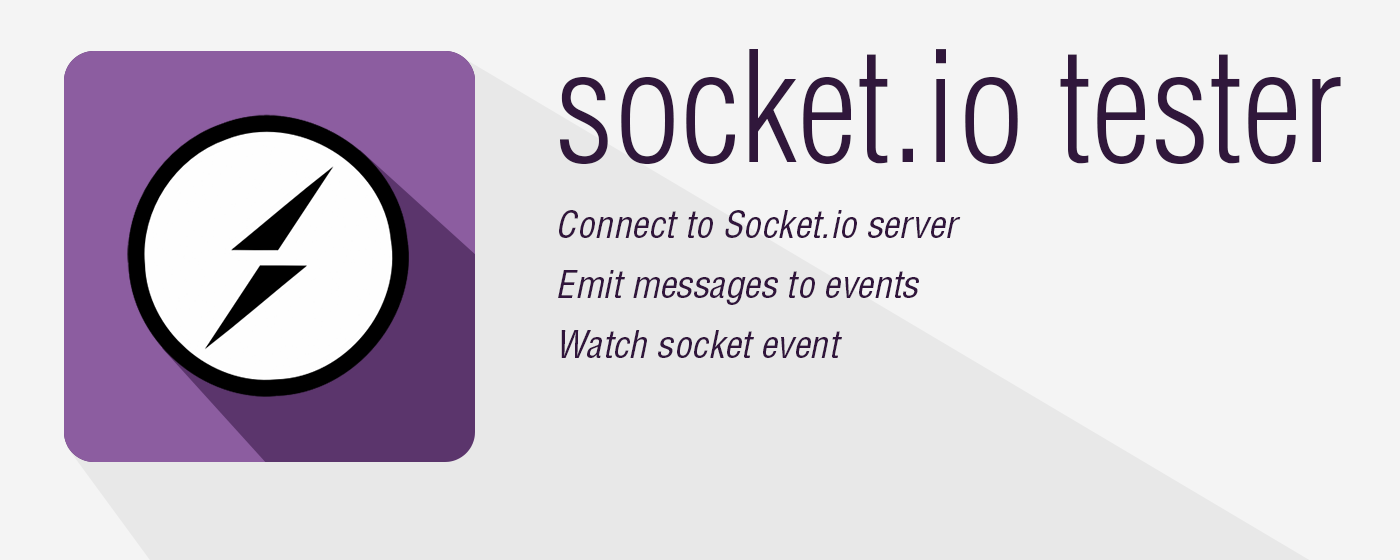
<style>
.page{position:relative;width:1400px;height:560px;background:#f4f4f4}
.page>*{position:absolute;margin:0}
.t1{font:151px "HelveticaLTStd-LightCond";color:#30173b}
.t2{font:37px/60px "HelveticaLTStd-CondObl";color:#31153c}
</style>
<div class="page">
<p class="t1" style="left:560px;top:49px;width:781px;height:115px">socket.io tester</p>
<p class="t2" style="left:558px;top:210px;width:403px;height:148px">Connect to Socket.io server<br>Emit messages to events<br>Watch socket event</p>
</div>
